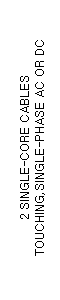
<style>
.page{position:relative;width:60px;height:300px;background:#ffffff}
.page>*{position:absolute;margin:0}
.t1{font:12.5px "Dotum";color:#000000}
</style>
<div class="page">
<p class="t1" style="left:20px;top:40px;width:25px;height:216px;rotate:180deg">2 SINGLE-CORE CABLES<br>TOUCHING,SINGLE-PHASE AC OR DC</p>
</div>
